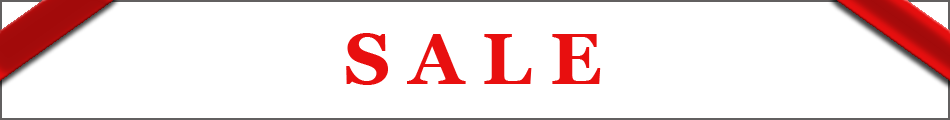
<style>
.page{position:relative;width:950px;height:120px;background:#ffffff}
.page>*{position:absolute;margin:0}
.t1{font:72px "Georgia-Bold";color:#e80f0f}
</style>
<div class="page">
<p class="t1" style="left:346px;top:33px;width:255px;height:52px">S A L E</p>
</div>
